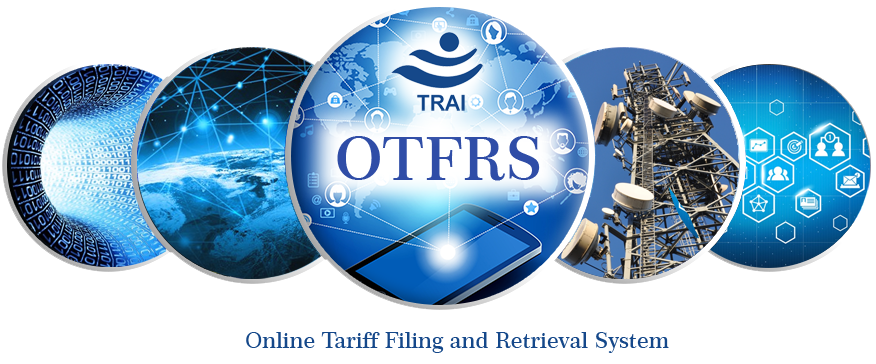
<style>
.page{position:relative;width:876px;height:364px;background:#ffffff}
.page>*{position:absolute;margin:0}
.t1{font:60px "Century751BT-SemiBold";color:#2f4da7}
.t2{font:22px "Century751BT-SemiBold";color:#15488a}
</style>
<div class="page">
<p class="t1" style="left:337px;top:136px;width:203px;height:45px">OTFRS</p>
<p class="t2" style="left:246px;top:332px;width:423px;height:21px">Online Tariff Filing and Retrieval System</p>
</div>
